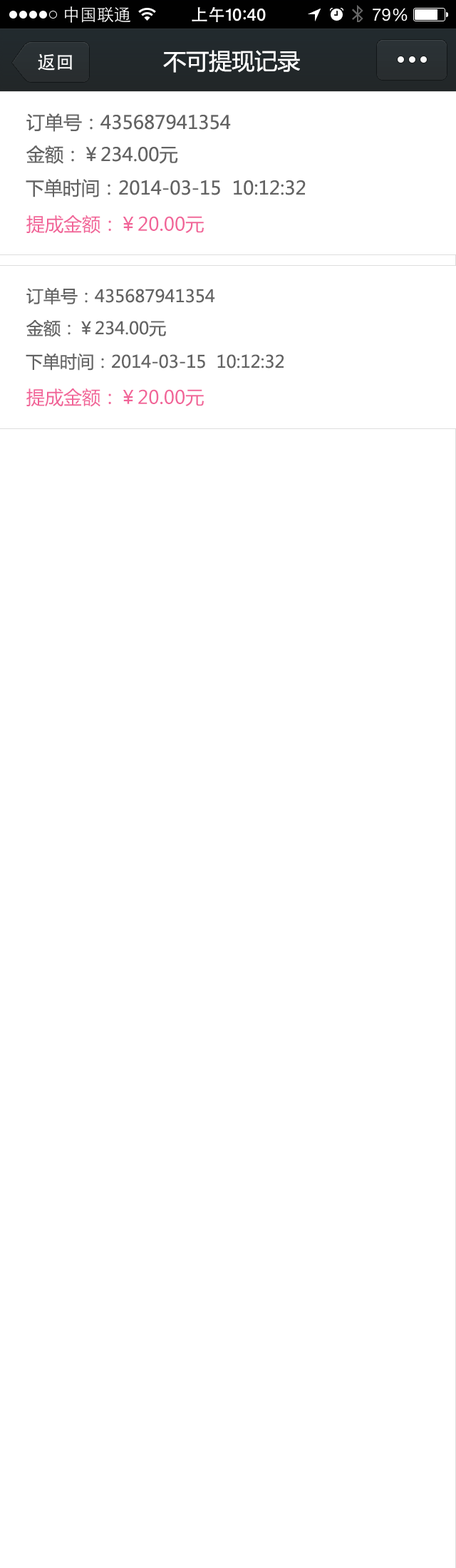
<style>
.page{position:relative;width:456px;height:1568px;background:#ffffff}
.page>*{position:absolute;margin:0}
.t1{font:22.8px "MicrosoftYaHei";color:#ffffff}
.t2{font:18.5px "MicrosoftYaHei";color:#636363}
.t3{font:18.5px "MicrosoftYaHei";color:#f16498}
.t4{font:17.1px "MicrosoftYaHei";color:#636363}
</style>
<div class="page">
<p class="t1" style="left:163px;top:50px;width:137px;height:23px">不可提现记录</p>
<p class="t2" style="left:26px;top:113px;width:205px;height:19px">订单号：435687941354</p>
<p class="t2" style="left:26px;top:145px;width:152px;height:19px">金额：￥234.00元</p>
<p class="t2" style="left:26px;top:179px;width:280px;height:18px">下单时间：2014-03-15  10:12:32</p>
<p class="t3" style="left:26px;top:215px;width:178px;height:19px">提成金额：￥20.00元</p>
<p class="t4" style="left:26px;top:287px;width:189px;height:18px">订单号：435687941354</p>
<p class="t4" style="left:26px;top:319px;width:140px;height:18px">金额：￥234.00元</p>
<p class="t4" style="left:26px;top:353px;width:258px;height:18px">下单时间：2014-03-15  10:12:32</p>
<p class="t3" style="left:26px;top:388px;width:178px;height:19px">提成金额：￥20.00元</p>
</div>
